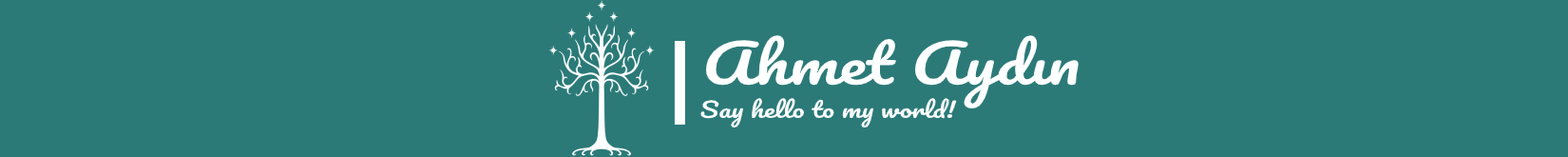
<style>
.page{position:relative;width:1568px;height:157px;background:#2b7a78}
.page>*{position:absolute;margin:0}
.t1{font:52.3px "Pacifico-Regular";color:#feffff;scale:1.29 1}
.t2{font:20.9px "Pacifico-Regular";color:#feffff;scale:1.29 1}
</style>
<div class="page">
<p class="t1" style="left:706px;top:35px;width:373px;height:74px">Ahmet Aydın</p>
<p class="t2" style="left:700px;top:98px;width:257px;height:30px">Say hello to my world!</p>
</div>
